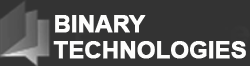
<style>
.page{position:relative;width:250px;height:66px;background:#333333}
.page>*{position:absolute;margin:0}
.t1{font:24px/26.4px "Arial-BoldMT";letter-spacing:-0.02em;color:#fdfdfc;font-weight:bold}
.t2{font:24px/0px "Arial-BoldMT";letter-spacing:-0.02em;color:#fdfdfc;font-weight:bold}
</style>
<div class="page">
<p class="t1" style="left:53px;top:15px;width:193px;height:44px"><span class="t2">BINARY <br></span>TECHNOLO<span class="t2">GIES</span></p>
</div>
